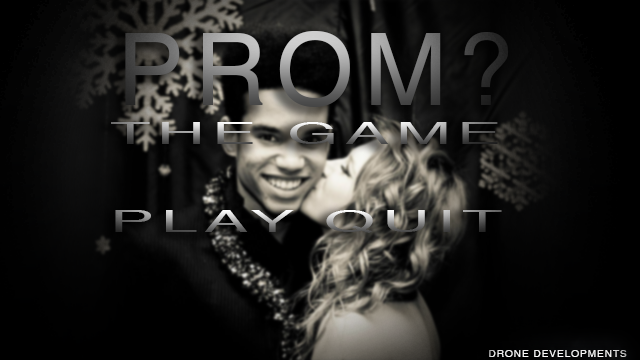
<style>
.page{position:relative;width:640px;height:360px}
.page>*{position:absolute;margin:0}
.t1{font:100px "Helvetica";letter-spacing:0.1em}
.t2{font:30px "Helvetica";letter-spacing:0.1em;scale:2.2 1}
.t3{font:10px "Helvetica";letter-spacing:0.1em;color:#ffffff}
</style>
<div class="page">
<p class="t1" style="left:125px;top:31px;width:384px;height:76px">PROM?</p>
<p class="t2" style="left:111px;top:122px;width:387px;height:22px">THE GAME</p>
<p class="t2" style="left:115px;top:210px;width:387px;height:23px">PLAY QUIT</p>
<p class="t3" style="left:489px;top:350px;width:138px;height:7px">DRONE DEVELOPMENTS</p>
</div>
